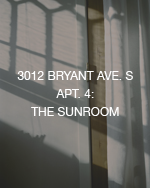
<style>
.page{position:relative;width:150px;height:188px}
.page>*{position:absolute;margin:0}
.t1{font:12px/18px "HelveticaNeue";color:#fefefe}
</style>
<div class="page">
<p class="t1" style="left:17px;top:71px;width:116px;height:45px;text-align:center">3012 BRYANT AVE. S APT. 4: <br>THE SUNROOM</p>
</div>
